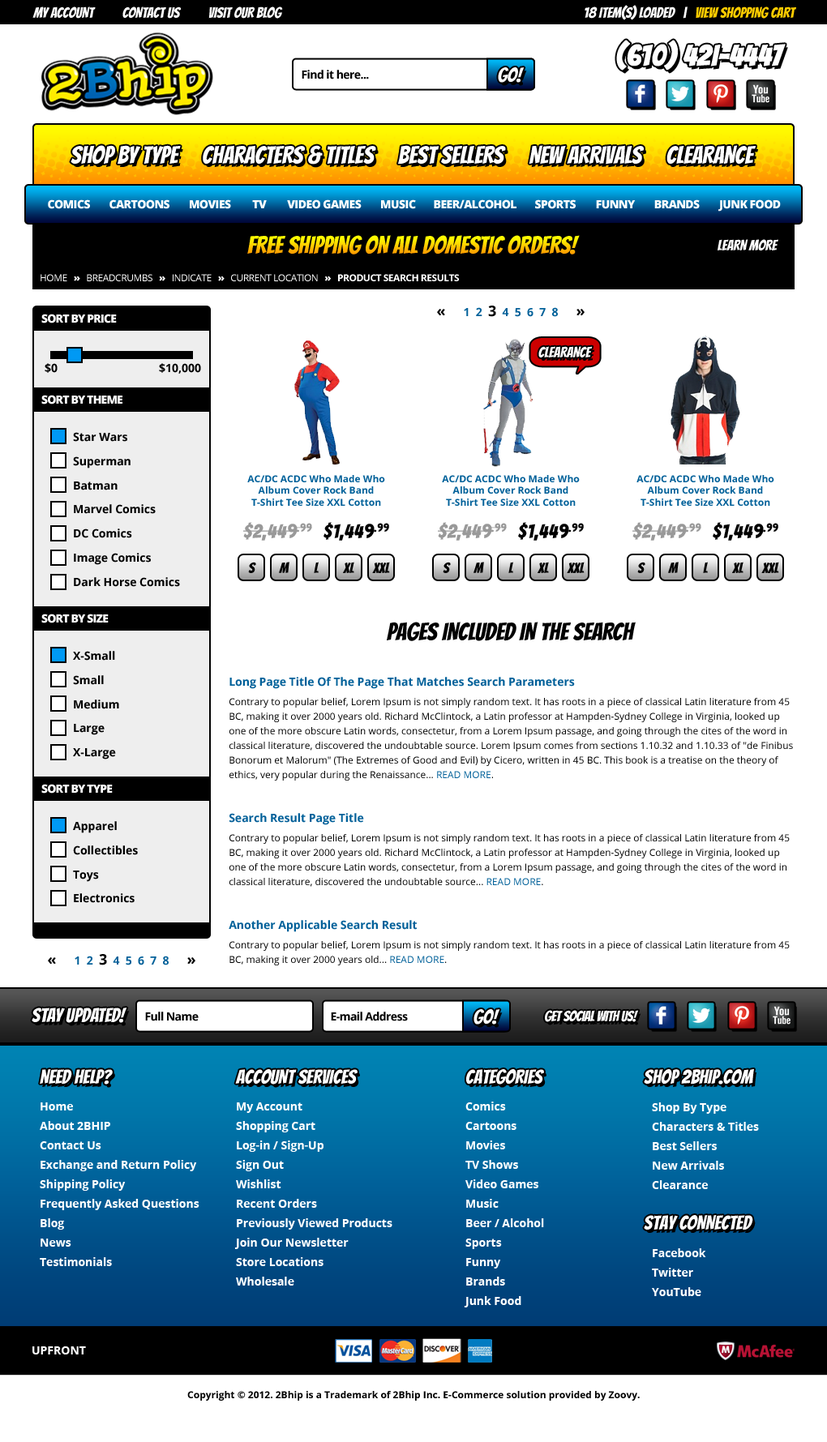
<style>
.page{position:relative;width:827px;height:1442px;background:#ffffff}
.page>*{position:absolute;margin:0}
.t1{font:14.6px "Bangers-Regular";color:#ffffff}
.t2{font:14.6px "Bangers-Regular";color:#ffcc00}
.t3{font:29.2px "Bangers-Regular";color:#ffffff;font-weight:bold}
.t4{font:11.3px "OpenSans-Bold";letter-spacing:-0.04em;color:#000000}
.t5{font:19.5px "Bangers-Regular";color:#ffffff}
.t6{font:24.3px "Bangers-Regular";color:#ffffff}
.t7{font:11.3px "OpenSans-Extrabold";letter-spacing:-0.04em;color:#ffffff}
.t8{font:24.3px "Bangers-Regular"}
.t9{font:9.7px "OpenSans-Bold";letter-spacing:-0.04em;color:#ffffff}
.t10{font:9.7px "OpenSans";letter-spacing:-0.04em;color:#ffffff}
.t11{font:9.7px "OpenSans-Extrabold";letter-spacing:-0.04em;color:#ffffff}
.t12{font:11.3px "OpenSans-Bold";color:#006099}
.t13{font:14.6px "OpenSans-Bold";color:#000000}
.t14{font:11.3px "OpenSans-Extrabold";letter-spacing:-0.06em;color:#ffffff}
.t15{font:11.3px "OpenSans-Bold";color:#000000}
.t16{font:11.3px/24.1px "OpenSans-Bold";color:#000000}
.t17{font:9.7px "OpenSans-Bold";color:#006099}
.t18{font:19.5px "Bangers-Regular";letter-spacing:0.04em;color:#999999}
.t19{font:19.5px "Bangers-Regular";letter-spacing:0.04em;color:#000000}
.t20{font:14.6px "Bangers-Regular";color:#000000}
.t21{font:24.3px "Bangers-Regular";color:#000000}
.t22{font:9.7px/14.6px "OpenSans";color:#000000}
.t23{font:11.3px/14.6px "OpenSans-Bold";color:#006099}
.t24{font:9.7px/19.5px "OpenSans";color:#000000}
.t25{font:9.7px/14.6px "OpenSans";color:#006099}
.t26{font:14.6px "Bangers-Regular";letter-spacing:-0.025em;color:#ffffff}
.t27{font:11.3px/19.5px "OpenSans-Bold";color:#ffffff}
.t28{font:11.3px "OpenSans-Bold";color:#ffffff}
.t29{font:9.7px "OpenSans-Bold";color:#000000}
</style>
<div class="page">
<p class="t1" style="left:584px;top:5px;width:212px;height:15px">18 ITEM(S) LOADED   |   <span class="t2">VIEW SHOPPING CART</span></p>
<p class="t1" style="left:32px;top:6px;width:251px;height:13px">MY ACCOUNT          CONTACT US          VISIT OUR BLOG</p>
<p class="t3" style="left:616px;top:40px;width:170px;height:31px">(610) 42I-4447</p>
<p class="t4" style="left:302px;top:70px;width:67px;height:9px">Find it here...</p>
<p class="t5" style="left:498px;top:67px;width:26px;height:16px">GO!</p>
<p class="t6" style="left:71px;top:145px;width:110px;height:19px">SHOP BY TYPE</p>
<p class="t6" style="left:203px;top:145px;width:173px;height:20px">CHARACTERS &amp; TITLES</p>
<p class="t6" style="left:398px;top:145px;width:108px;height:19px">BEST SELLERS</p>
<p class="t6" style="left:529px;top:145px;width:115px;height:20px">NEW ARRIVALS</p>
<p class="t6" style="left:666px;top:145px;width:90px;height:19px">CLEARANCE</p>
<p class="t7" style="left:48px;top:199px;width:42px;height:10px">COMICS</p>
<p class="t7" style="left:109px;top:199px;width:60px;height:10px">CARTOONS</p>
<p class="t7" style="left:190px;top:199px;width:41px;height:10px">MOVIES</p>
<p class="t7" style="left:252px;top:200px;width:15px;height:8px">TV</p>
<p class="t7" style="left:287px;top:199px;width:75px;height:10px">VIDEO GAMES</p>
<p class="t7" style="left:381px;top:199px;width:35px;height:10px">MUSIC</p>
<p class="t7" style="left:434px;top:199px;width:82px;height:10px">BEER/ALCOHOL</p>
<p class="t7" style="left:535px;top:199px;width:41px;height:10px">SPORTS</p>
<p class="t7" style="left:596px;top:200px;width:40px;height:9px">FUNNY</p>
<p class="t7" style="left:654px;top:199px;width:46px;height:10px">BRANDS</p>
<p class="t7" style="left:718px;top:199px;width:63px;height:13px">JUNK FOOD</p>
<p class="t8" style="left:247px;top:235px;width:333px;height:20px">FREE SHIPPING ON ALL DOMESTIC ORDERS!</p>
<p class="t1" style="left:717px;top:239px;width:61px;height:11px">LEARN MORE</p>
<p class="t9" style="left:41px;top:274px;width:418px;height:7px"><span class="t10">HOME   </span><span class="t11">»</span><span class="t10">   BREADCRUMBS   </span><span class="t11">»</span><span class="t10">   INDICATE   </span><span class="t11">»</span><span class="t10">   CURRENT LOCATION   </span><span class="t11">»   </span>PRODUCT SEARCH RESULTS</p>
<p class="t12" style="left:437px;top:306px;width:147px;height:11px"><span class="t13">«      </span>1  2  <span class="t13">3</span>  4  5  6  7  8      <span class="t13">»</span></p>
<p class="t14" style="left:41px;top:314px;width:76px;height:9px">SORT BY PRICE</p>
<p class="t1" style="left:538px;top:346px;width:55px;height:11px">CLEARANCE</p>
<p class="t15" style="left:45px;top:363px;width:13px;height:10px">$0</p>
<p class="t15" style="left:159px;top:363px;width:42px;height:11px">$10,000</p>
<p class="t14" style="left:41px;top:395px;width:81px;height:10px">SORT BY THEME</p>
<p class="t16" style="left:73px;top:432px;width:107px;height:155px">Star Wars<br>Superman<br>Batman<br>Marvel Comics<br>DC Comics<br>Image Comics<br>Dark Horse Comics</p>
<p class="t17" style="left:247px;top:475px;width:138px;height:31px;text-align:center">AC/DC ACDC Who Made Who<br>Album Cover Rock Band<br>T-Shirt Tee Size XXL Cotton</p>
<p class="t17" style="left:442px;top:475px;width:138px;height:31px;text-align:center">AC/DC ACDC Who Made Who<br>Album Cover Rock Band<br>T-Shirt Tee Size XXL Cotton</p>
<p class="t17" style="left:636px;top:475px;width:138px;height:31px;text-align:center">AC/DC ACDC Who Made Who<br>Album Cover Rock Band<br>T-Shirt Tee Size XXL Cotton</p>
<p class="t18" style="left:243px;top:522px;width:69px;height:19px">$2,449.99</p>
<p class="t19" style="left:323px;top:522px;width:66px;height:19px">$1,449.99</p>
<p class="t18" style="left:438px;top:522px;width:69px;height:19px">$2,449.99</p>
<p class="t19" style="left:518px;top:522px;width:66px;height:19px">$1,449.99</p>
<p class="t18" style="left:632px;top:522px;width:69px;height:19px">$2,449.99</p>
<p class="t19" style="left:713px;top:522px;width:65px;height:19px">$1,449.99</p>
<p class="t20" style="left:248px;top:562px;width:8px;height:11px">S</p>
<p class="t20" style="left:279px;top:562px;width:10px;height:11px">M</p>
<p class="t20" style="left:314px;top:562px;width:5px;height:11px">L</p>
<p class="t20" style="left:343px;top:562px;width:11px;height:11px">XL</p>
<p class="t20" style="left:372px;top:562px;width:18px;height:11px">XXL</p>
<p class="t20" style="left:443px;top:562px;width:8px;height:11px">S</p>
<p class="t20" style="left:473px;top:562px;width:11px;height:11px">M</p>
<p class="t20" style="left:508px;top:562px;width:5px;height:11px">L</p>
<p class="t20" style="left:537px;top:562px;width:12px;height:11px">XL</p>
<p class="t20" style="left:567px;top:562px;width:17px;height:11px">XXL</p>
<p class="t20" style="left:637px;top:562px;width:8px;height:11px">S</p>
<p class="t20" style="left:668px;top:562px;width:11px;height:11px">M</p>
<p class="t20" style="left:703px;top:562px;width:5px;height:11px">L</p>
<p class="t20" style="left:732px;top:562px;width:11px;height:11px">XL</p>
<p class="t20" style="left:761px;top:562px;width:18px;height:11px">XXL</p>
<p class="t14" style="left:41px;top:614px;width:68px;height:9px">SORT BY SIZE</p>
<p class="t21" style="left:387px;top:622px;width:249px;height:19px">PAGES INCLUDED IN THE SEARCH</p>
<p class="t16" style="left:73px;top:651px;width:46px;height:109px">X-Small<br>Small<br>Medium<br>Large<br>X-Large</p>
<p class="t22" style="left:229px;top:677px;width:564px;height:288px"><span class="t23">Long Page Title Of The Page That Matches Search Parameters<br></span><span class="t24">Contrary to popular belief, Lorem Ipsum is not simply random text. It has roots in a piece of classical Latin literature from 45 </span>BC, making it over 2000 years old. Richard McClintock, a Latin professor at Hampden-Sydney College in Virginia, looked up one of the more obscure Latin words, consectetur, from a Lorem Ipsum passage, and going through the cites of the word in classical literature, discovered the undoubtable source. Lorem Ipsum comes from sections 1.10.32 and 1.10.33 of "de Finibus Bonorum et Malorum" (The Extremes of Good and Evil) by Cicero, written in 45 BC. This book is a treatise on the theory of ethics, very popular during the Renaissance... <span class="t25">READ MORE</span>.<br><br><br><span class="t23">Search Result Page Title<br></span><span class="t24">Contrary to popular belief, Lorem Ipsum is not simply random text. It has roots in a piece of classical Latin literature from 45 </span>BC, making it over 2000 years old. Richard McClintock, a Latin professor at Hampden-Sydney College in Virginia, looked up one of the more obscure Latin words, consectetur, from a Lorem Ipsum passage, and going through the cites of the word in classical literature, discovered the undoubtable source... <span class="t25">READ MORE</span>.<br><br><br><span class="t23">Another Applicable Search Result<br></span><span class="t24">Contrary to popular belief, Lorem Ipsum is not simply random text. It has roots in a piece of classical Latin literature from 45 </span>BC, making it over 2000 years old... <span class="t25">READ MORE</span>.</p>
<p class="t14" style="left:41px;top:784px;width:72px;height:10px">SORT BY TYPE</p>
<p class="t16" style="left:73px;top:821px;width:65px;height:82px">Apparel<br>Collectibles<br>Toys<br>Electronics</p>
<p class="t12" style="left:48px;top:954px;width:147px;height:11px"><span class="t13">«      </span>1  2  <span class="t13">3</span>  4  5  6  7  8      <span class="t13">»</span></p>
<p class="t5" style="left:32px;top:1008px;width:95px;height:15px">STAY UPDATED!</p>
<p class="t4" style="left:145px;top:1012px;width:54px;height:9px">Full Name</p>
<p class="t4" style="left:331px;top:1012px;width:77px;height:9px">E-mail Address</p>
<p class="t5" style="left:473px;top:1009px;width:27px;height:16px">GO!</p>
<p class="t26" style="left:545px;top:1010px;width:94px;height:12px">GET SOCIAL WITH US!</p>
<p class="t5" style="left:40px;top:1069px;width:73px;height:16px">NEED HELP?</p>
<p class="t5" style="left:235px;top:1069px;width:122px;height:16px">ACCOUNT SERVICES</p>
<p class="t5" style="left:466px;top:1069px;width:78px;height:16px">CATEGORIES</p>
<p class="t5" style="left:644px;top:1069px;width:110px;height:16px">SHOP 2BHIP.COM</p>
<p class="t27" style="left:40px;top:1102px;width:159px;height:164px">Home<br>About 2BHIP<br>Contact Us<br>Exchange and Return Policy<br>Shipping Policy<br>Frequently Asked Questions<br>Blog<br>News<br>Testimonials</p>
<p class="t27" style="left:234px;top:1102px;width:158px;height:184px">My Account<br>Shopping Cart<br>Log-in / Sign-Up<br>Sign Out<br>Wishlist<br>Recent Orders<br>Previously Viewed Products<br>Join Our Newsletter<br>Store Locations<br>Wholesale</p>
<p class="t27" style="left:464px;top:1102px;width:80px;height:206px">Comics<br>Cartoons<br>Movies<br>TV Shows<br>Video Games<br>Music<br>Beer / Alcohol<br>Sports<br>Funny<br>Brands<br>Junk Food</p>
<p class="t27" style="left:652px;top:1102px;width:107px;height:87px">Shop By Type<br>Characters &amp; Titles<br>Best Sellers<br>New Arrivals<br>Clearance</p>
<p class="t5" style="left:644px;top:1215px;width:109px;height:15px">STAY CONNECTED</p>
<p class="t27" style="left:652px;top:1248px;width:54px;height:48px">Facebook<br>Twitter<br>YouTube</p>
<p class="t28" style="left:32px;top:1346px;width:54px;height:9px">UPFRONT</p>
<p class="t29" style="left:187px;top:1391px;width:453px;height:10px">Copyright © 2012. 2Bhip is a Trademark of 2Bhip Inc. E-Commerce solution provided by Zoovy.</p>
</div>
